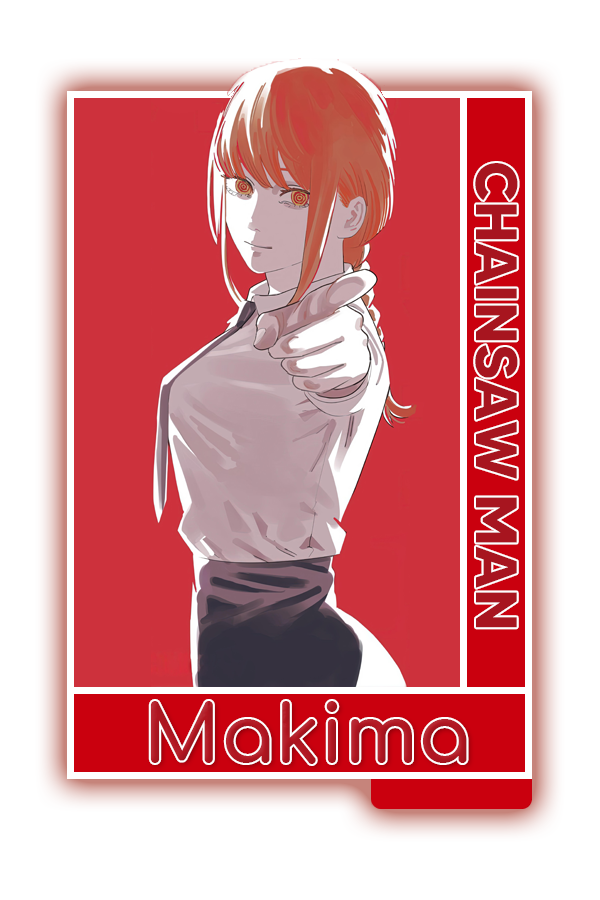
<style>
.page{position:relative;width:600px;height:900px;background:#ffffff}
.page>*{position:absolute;margin:0}
.t1{font:58.3px "MADETOMMY-Bold";color:#a7151f}
.t2{font:79.2px "Comfortaa-Bold";color:#b11621}
</style>
<div class="page">
<p class="t1" style="left:475px;top:163px;width:43px;height:465px;rotate:90deg">CHAINSAW MAN</p>
<p class="t2" style="left:150px;top:701px;width:317px;height:63px">Makima</p>
</div>
